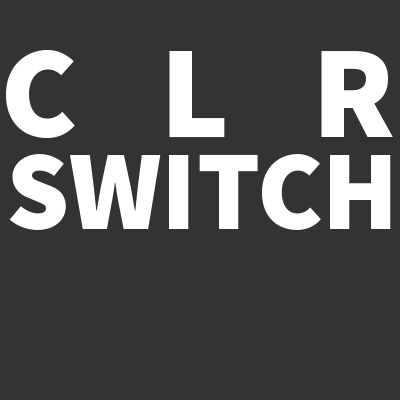
<style>
.page{position:relative;width:400px;height:400px;background:#333333}
.page>*{position:absolute;margin:0}
.t1{font:131.3px "SourceSansPro-Black";color:#ffffff}
.t2{font:112.2px "SourceSansPro-Black";color:#ffffff}
</style>
<div class="page">
<p class="t1" style="left:6px;top:49px;width:387px;height:89px">C   L   R</p>
<p class="t2" style="left:9px;top:154px;width:382px;height:76px">SWITCH</p>
</div>
